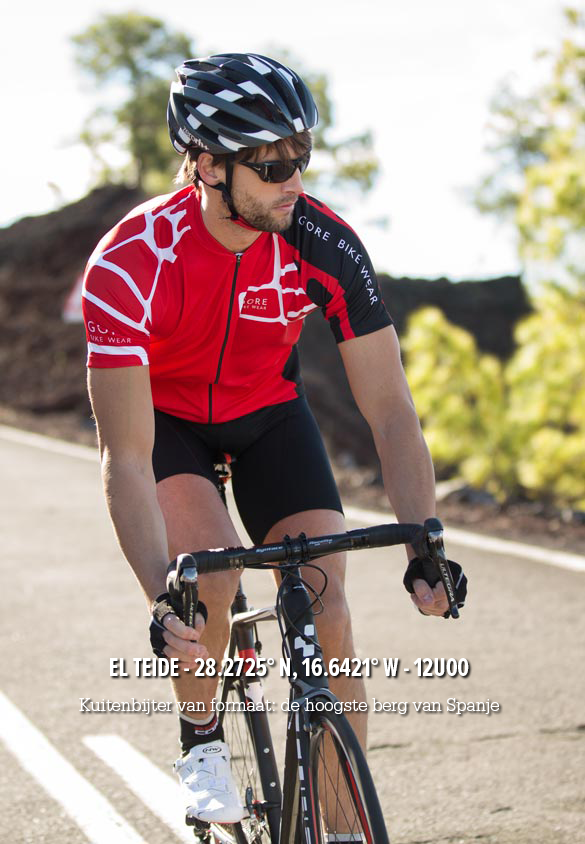
<style>
.page{position:relative;width:585px;height:844px}
.page>*{position:absolute;margin:0}
.t1{font:19.2px/17.1px "SerifaStd-Light";color:#ffffff;scale:0.96 1}
.t2{font:26.7px/17.1px "ProximaNovaExCn-Bold";color:#ffffff;scale:0.96 1}
</style>
<div class="page">
<p class="t1" style="left:79px;top:658px;width:420px;height:56px;text-align:center"><span class="t2">EL TEIDE - 28.2725° N, 16.6421° W - 12U00<br><br></span>Kuitenbijter van formaat: de hoogste berg van Spanje</p>
</div>
